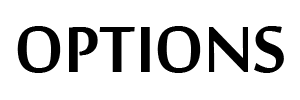
<style>
.page{position:relative;width:300px;height:100px;background:#ffffff}
.page>*{position:absolute;margin:0}
.t1{font:100px "MoolBoran";color:#000000}
</style>
<div class="page">
<p class="t1" style="left:17px;top:26px;width:267px;height:47px">OPTIONS</p>
</div>
